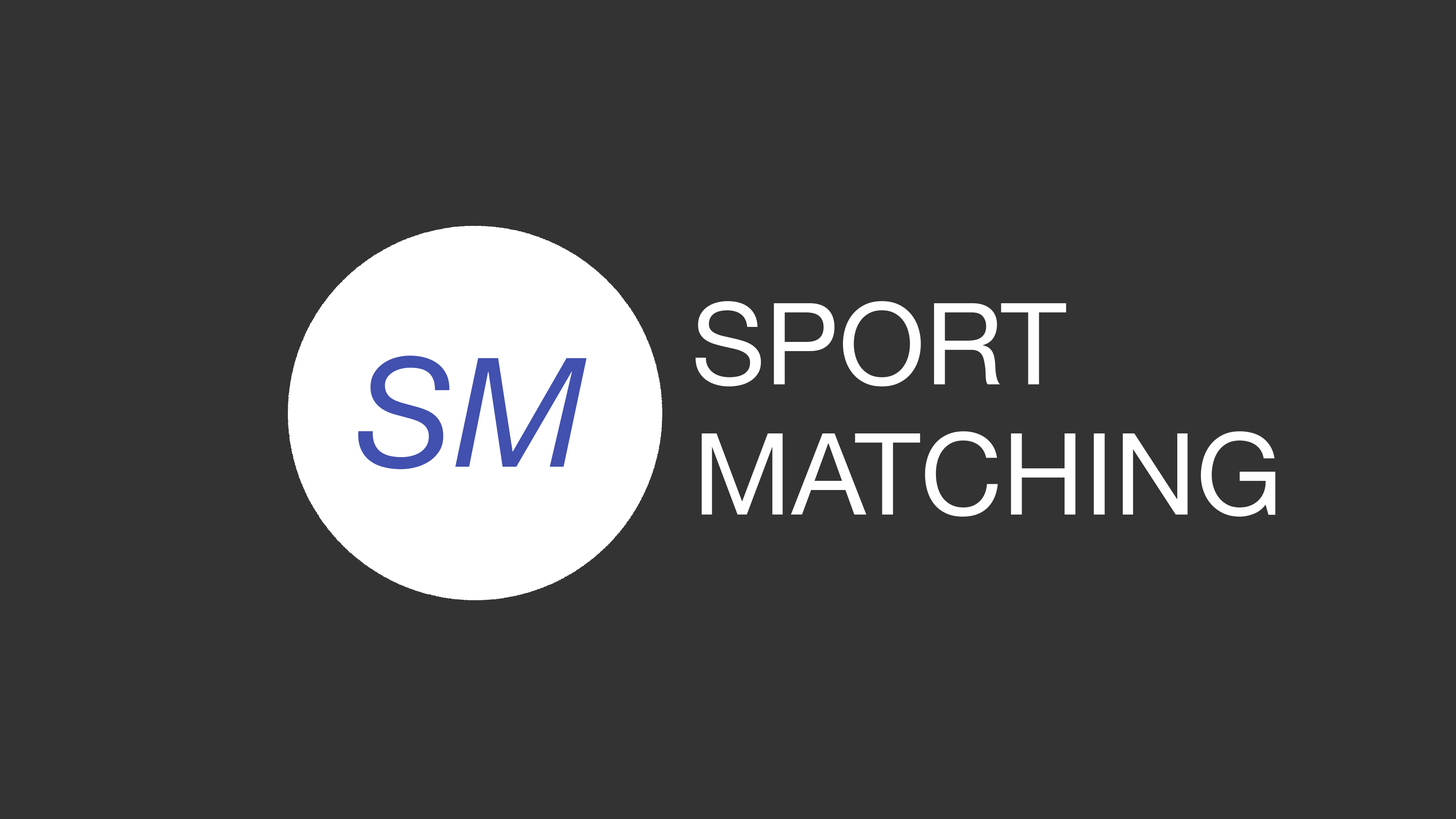
<style>
.page{position:relative;width:1456px;height:819px;background:#333333}
.page>*{position:absolute;margin:0}
.t1{font:113.8px "HelveticaNeue";color:#ffffff}
.t2{font:151.7px "HelveticaNeue-Italic";color:#4250af}
</style>
<div class="page">
<p class="t1" style="left:695px;top:301px;width:371px;height:85px">SPORT</p>
<p class="t2" style="left:358px;top:356px;width:229px;height:113px">SM</p>
<p class="t1" style="left:701px;top:431px;width:574px;height:86px">MATCHING</p>
</div>
